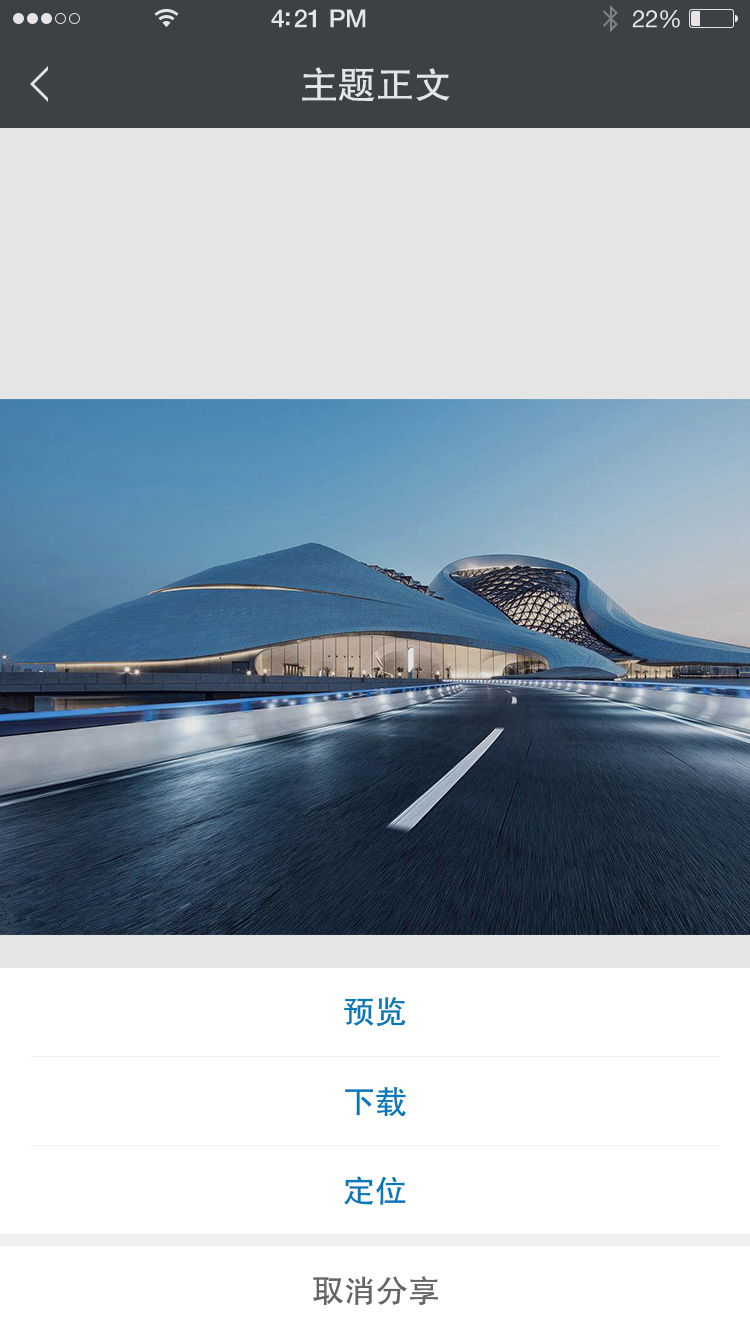
<style>
.page{position:relative;width:750px;height:1334px;background:#ffffff}
.page>*{position:absolute;margin:0}
.t1{font:38px "FZHTJW--GB1-0";color:#e5e5e5}
.t2{font:32px "FZHTJW--GB1-0";color:#0479bb}
.t3{font:32px "FZHTJW--GB1-0";color:#666666}
</style>
<div class="page">
<p class="t1" style="left:302px;top:67px;width:148px;height:34px">主题正文</p>
<p class="t2" style="left:344px;top:997px;width:62px;height:30px">预览</p>
<p class="t2" style="left:345px;top:1087px;width:61px;height:30px">下载</p>
<p class="t2" style="left:344px;top:1176px;width:62px;height:29px">定位</p>
<p class="t3" style="left:313px;top:1276px;width:125px;height:29px">取消分享</p>
</div>
